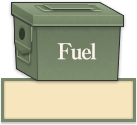
<style>
.page{position:relative;width:137px;height:125px;background:#f7e6bd}
.page>*{position:absolute;margin:0}
.t1{font:22px "RyuminPro-ExBold";letter-spacing:-0.08em;color:#fdf3ed}
</style>
<div class="page">
<p class="t1" style="left:57px;top:43px;width:40px;height:17px">Fuel</p>
</div>
